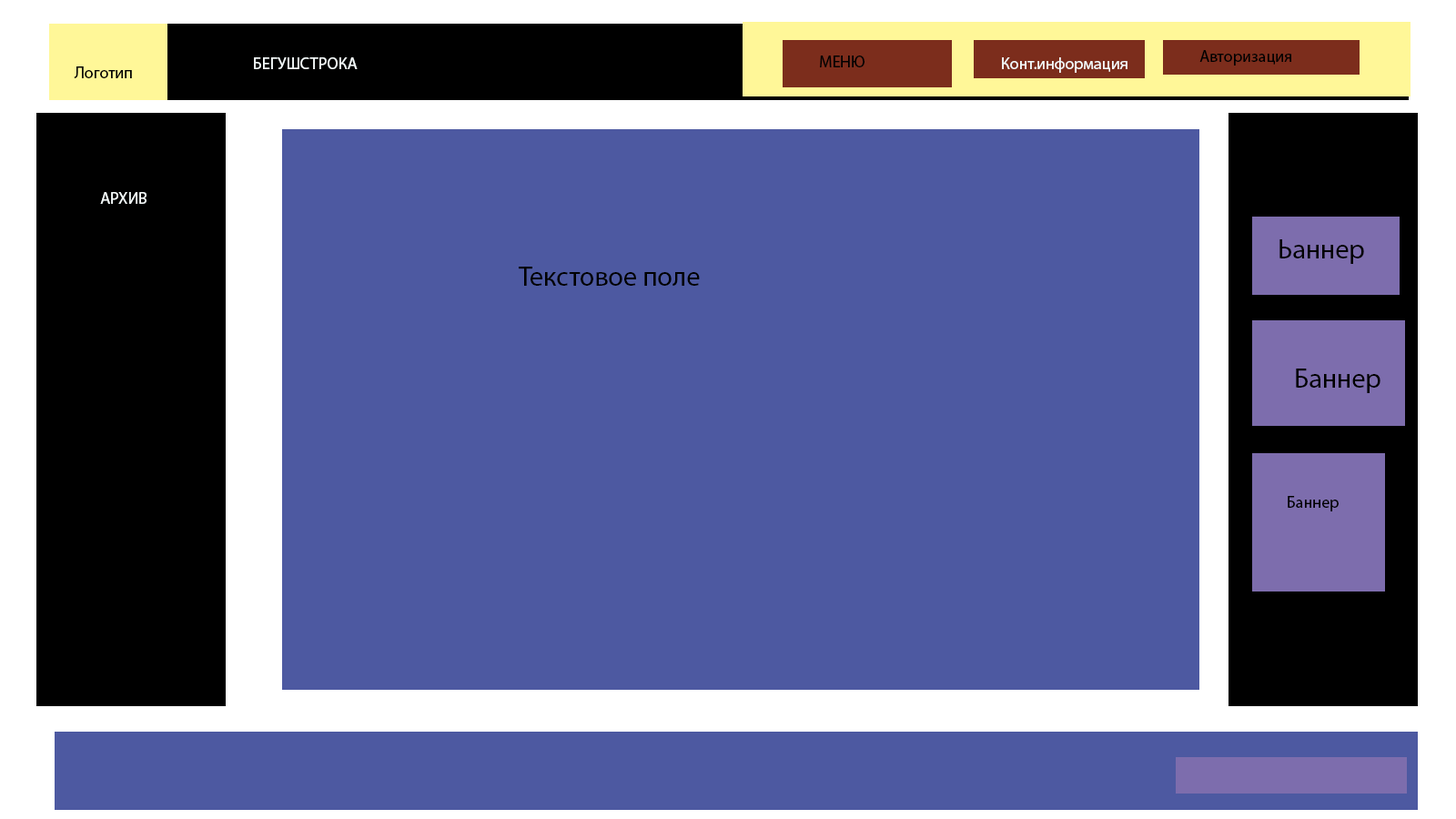
<style>
.page{position:relative;width:1456px;height:819px;background:#4d59a1}
.page>*{position:absolute;margin:0}
.t1{font:16.4px "MyriadPro-Regular";color:#000000}
.t2{font:16.4px "MyriadPro-Regular";color:#f4fafa}
.t3{font:27.3px "MyriadPro-Regular";color:#000000}
</style>
<div class="page">
<p class="t1" style="left:1199px;top:50px;width:92px;height:16px">Авторизация</p>
<p class="t2" style="left:254px;top:57px;width:104px;height:12px">БЕГУШСТРОКА</p>
<p class="t1" style="left:820px;top:56px;width:44px;height:11px">МЕНЮ</p>
<p class="t2" style="left:1002px;top:57px;width:125px;height:16px">Конт.информация</p>
<p class="t1" style="left:74px;top:66px;width:58px;height:12px">Логотип</p>
<p class="t2" style="left:100px;top:192px;width:47px;height:12px">АРХИВ</p>
<p class="t3" style="left:1279px;top:239px;width:85px;height:25px">Ьаннер</p>
<p class="t3" style="left:519px;top:267px;width:181px;height:19px">Текстовое поле</p>
<p class="t3" style="left:1296px;top:369px;width:84px;height:24px">Баннер</p>
<p class="t1" style="left:1288px;top:496px;width:51px;height:15px">Баннер</p>
</div>
